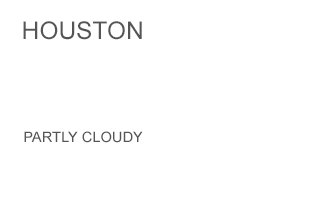
<style>
.page{position:relative;width:330px;height:200px;background:#ffffff}
.page>*{position:absolute;margin:0}
.t1{font:24.5px "ArialMT";color:#555555}
.t2{font:14.3px "ArialMT";color:#555555}
</style>
<div class="page">
<p class="t1" style="left:23px;top:21px;width:119px;height:19px">HOUSTON</p>
<p class="t2" style="left:24px;top:131px;width:119px;height:12px">PARTLY CLOUDY</p>
</div>
